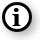
<style>
.page{position:relative;width:40px;height:40px;background:#ffffff}
.page>*{position:absolute;margin:0}
.t1{font:25px "Georgia-Bold";color:#000000}
</style>
<div class="page">
<p class="t1" style="left:12px;top:8px;width:9px;height:18px">i</p>
</div>
